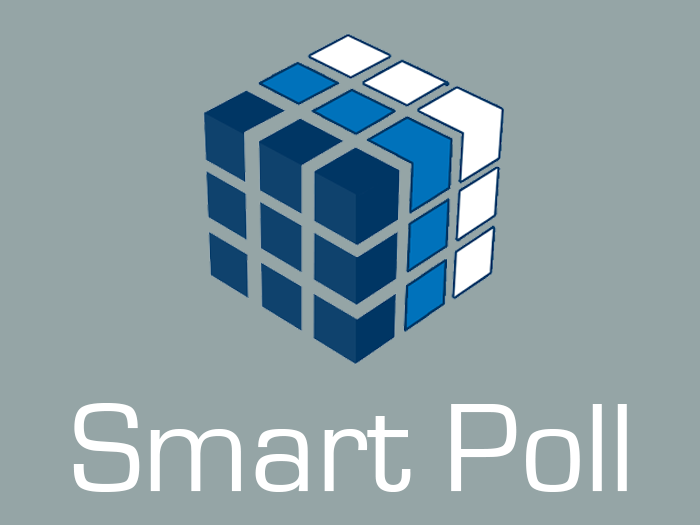
<style>
.page{position:relative;width:700px;height:525px;background:#95a5a6}
.page>*{position:absolute;margin:0}
.t1{font:130px "EurostileRegular";color:#ffffff}
</style>
<div class="page">
<p class="t1" style="left:73px;top:403px;width:554px;height:89px">Smart Poll</p>
</div>
